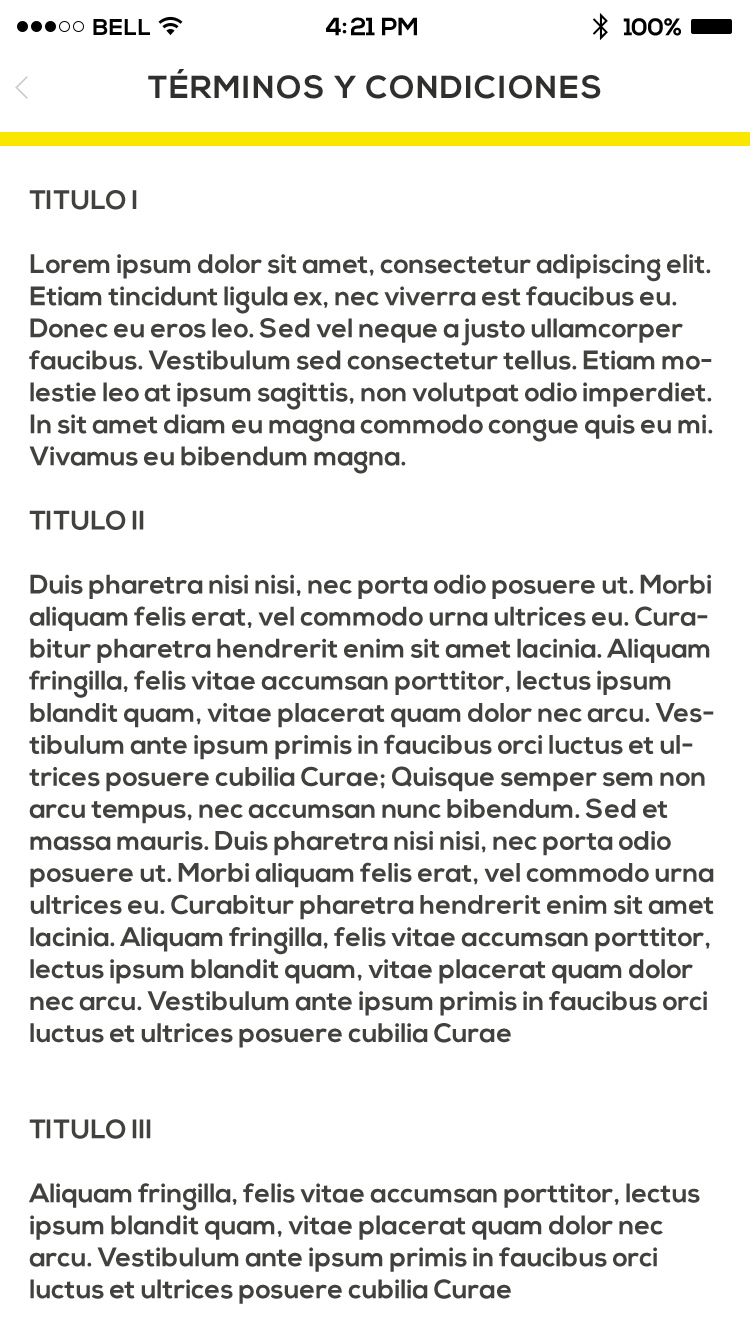
<style>
.page{position:relative;width:750px;height:1334px;background:#ffffff}
.page>*{position:absolute;margin:0}
.t1{font:25px "NexaBold";letter-spacing:-0.02em;color:#000000}
.t2{font:23px "NexaBold";letter-spacing:0.02em;color:#000000}
.t3{font:24px "NexaBold";letter-spacing:-0.02em;color:#000000}
.t4{font:31.7px "NexaBold";letter-spacing:0.05em;color:#2f2f2d}
.t5{font:26.7px "NexaBold";color:#41413e}
</style>
<div class="page">
<p class="t1" style="left:325px;top:17px;width:92px;height:19px">4:21 PM</p>
<p class="t2" style="left:93px;top:19px;width:57px;height:16px">BELL</p>
<p class="t3" style="left:623px;top:18px;width:58px;height:18px">100%</p>
<p class="t4" style="left:148px;top:69px;width:453px;height:30px">TÉRMINOS Y CONDICIONES</p>
<p class="t5" style="left:29px;top:190px;width:685px;height:1114px">TITULO I<br><br>Lorem ipsum dolor sit amet, consectetur adipiscing elit. Etiam tincidunt ligula ex, nec viverra est faucibus eu. Donec eu eros leo. Sed vel neque a justo ullamcorper faucibus. Vestibulum sed consectetur tellus. Etiam molestie leo at ipsum sagittis, non volutpat odio imperdiet. In sit amet diam eu magna commodo congue quis eu mi. Vivamus eu bibendum magna.<br><br>TITULO II<br><br>Duis pharetra nisi nisi, nec porta odio posuere ut. Morbi aliquam felis erat, vel commodo urna ultrices eu. Curabitur pharetra hendrerit enim sit amet lacinia. Aliquam fringilla, felis vitae accumsan porttitor, lectus ipsum blandit quam, vitae placerat quam dolor nec arcu. Vestibulum ante ipsum primis in faucibus orci luctus et ultrices posuere cubilia Curae; Quisque semper sem non arcu tempus, nec accumsan nunc bibendum. Sed et massa mauris. Duis pharetra nisi nisi, nec porta odio posuere ut. Morbi aliquam felis erat, vel commodo urna ultrices eu. Curabitur pharetra hendrerit enim sit amet lacinia. Aliquam fringilla, felis vitae accumsan porttitor, lectus ipsum blandit quam, vitae placerat quam dolor nec arcu. Vestibulum ante ipsum primis in faucibus orci luctus et ultrices posuere cubilia Curae<br><br><br>TITULO III<br><br>Aliquam fringilla, felis vitae accumsan porttitor, lectus ipsum blandit quam, vitae placerat quam dolor nec arcu. Vestibulum ante ipsum primis in faucibus orci luctus et ultrices posuere cubilia Curae</p>
</div>
